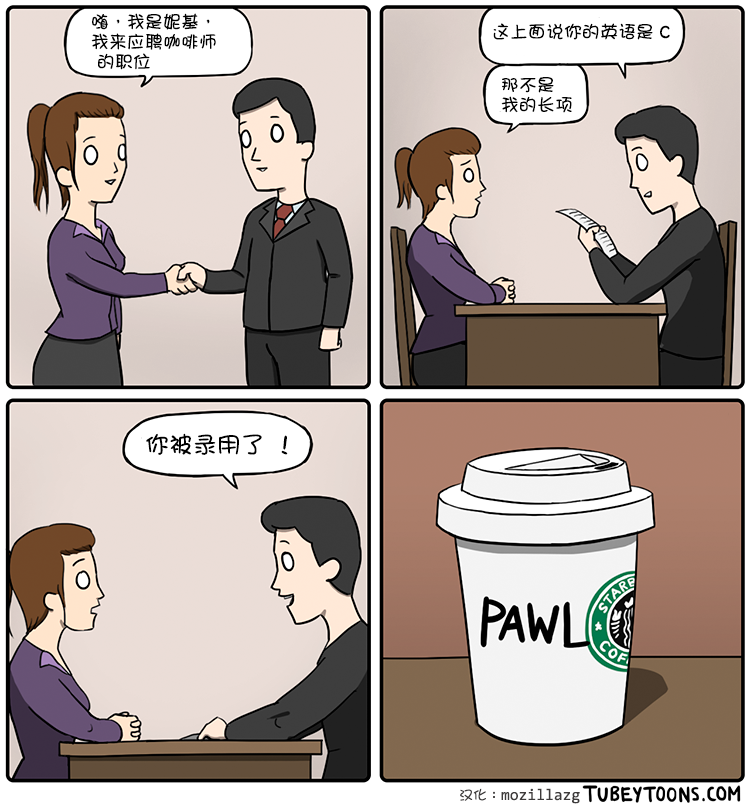
<style>
.page{position:relative;width:750px;height:807px}
.page>*{position:absolute;margin:0}
.t1{font:18px/20px "DFGirl";color:#000000}
.t2{font:18px "DFGirl";color:#000000}
.t3{font:18px "DFGirl";color:#000000;font-weight:bold}
.t4{font:24px "DFGirl";color:#000000}
</style>
<div class="page">
<p class="t1" style="left:91px;top:13px;width:125px;height:57px">嗨，我是妮基，<br>我来应聘咖啡师<br> 的职位</p>
<p class="t2" style="left:493px;top:23px;width:177px;height:17px">这上面说你的英语是 <span class="t3">C</span></p>
<p class="t1" style="left:501px;top:77px;width:71px;height:36px">那不是<br>我的长项</p>
<p class="t4" style="left:146px;top:433px;width:142px;height:22px">你被录用了 ！</p>
</div>
